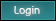
<style>
.page{position:relative;width:56px;height:21px}
.page>*{position:absolute;margin:0}
.t1{font:10px "BadComic";color:#e6e6e6}
</style>
<div class="page">
<p class="t1" style="left:14px;top:6px;width:26px;height:10px">Login</p>
</div>
